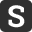
<style>
.page{position:relative;width:32px;height:32px;background:#303030}
.page>*{position:absolute;margin:0}
.t1{font:29.9px "RobotoSlab-Bold";color:#ffffff}
</style>
<div class="page">
<p class="t1" style="left:8px;top:5px;width:17px;height:23px">S</p>
</div>
